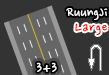
<style>
.page{position:relative;width:109px;height:75px;background:#333333}
.page>*{position:absolute;margin:0}
.t1{font:16px "NanumPen";color:#ffffff}
.t2{font:16px "NanumPen";letter-spacing:0.05em;color:#ff0000}
.t3{font:18px "NanumPen";letter-spacing:0.05em;color:#ffffff}
</style>
<div class="page">
<p class="t1" style="left:66px;top:8px;width:42px;height:12px">RuungJi</p>
<p class="t2" style="left:75px;top:23px;width:32px;height:12px">Large</p>
<p class="t3" style="left:36px;top:62px;width:21px;height:10px">3+3</p>
</div>
